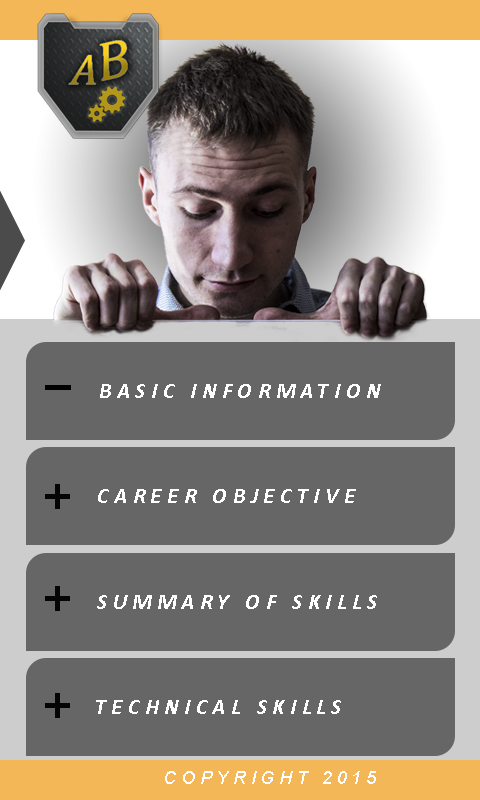
<style>
.page{position:relative;width:480px;height:800px;background:#666666}
.page>*{position:absolute;margin:0}
.t1{font:22px "Calibri-BoldItalic";letter-spacing:0.26em;color:#ffffff;text-transform:uppercase}
.t2{font:18px "Arial-ItalicMT";letter-spacing:0.26em;color:#ffffff;text-transform:uppercase}
</style>
<div class="page">
<p class="t1" style="left:100px;top:384px;width:281px;height:14px">basic information</p>
<p class="t1" style="left:98px;top:489px;width:258px;height:14px">Career Objective</p>
<p class="t1" style="left:97px;top:595px;width:280px;height:14px">Summary of Skills</p>
<p class="t1" style="left:96px;top:700px;width:245px;height:14px">Technical Skills</p>
<p class="t2" style="left:165px;top:771px;width:211px;height:13px">copyright 2015</p>
</div>
